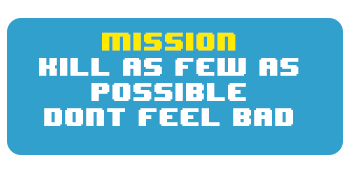
<style>
.page{position:relative;width:350px;height:171px;background:#31a0cc}
.page>*{position:absolute;margin:0}
.t1{font:21px "8BITWONDERNominal";color:#ffffff}
.t2{font:21px "8BITWONDERNominal";color:#ffea00}
</style>
<div class="page">
<p class="t1" style="left:39px;top:32px;width:260px;height:94px;text-align:center"><span class="t2">MissioN<br></span>Kill as few as possible<br>DonT feel bad</p>
</div>
